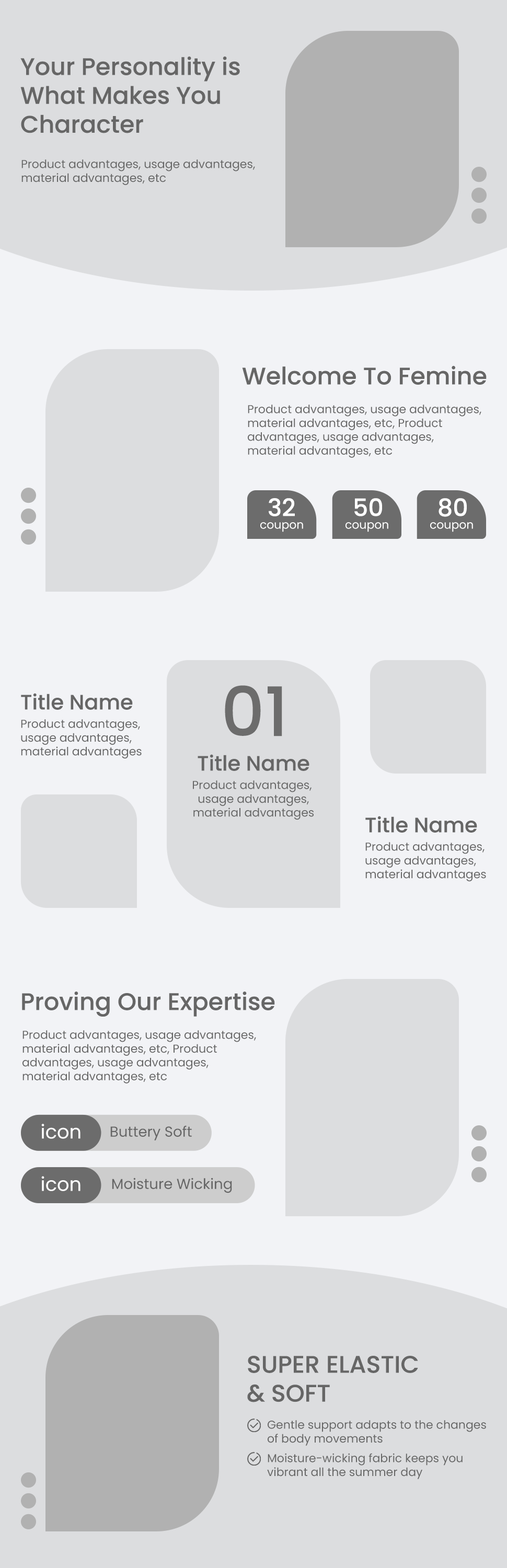
<style>
.page{position:relative;width:507px;height:1568px;background:#dcdddf}
.page>*{position:absolute;margin:0}
.t1{font:24px "Poppins-Medium";color:#666666}
.t2{font:11.5px "Poppins-Regular";color:#666666}
.t3{font:24px "Poppins-Medium";color:#ffffff}
.t4{font:11.5px "Poppins-Regular";color:#ffffff}
.t5{font:67.9px "Poppins-Medium";color:#6c6c6c}
.t6{font:20.9px "Poppins-Medium";color:#666666}
.t7{font:19.2px "Poppins-Regular";color:#ffffff}
.t8{font:14.4px "Poppins-Regular";color:#666666}
</style>
<div class="page">
<p class="t1" style="left:20px;top:56px;width:220px;height:77px">Your Personality is<br>What Makes You<br>Character</p>
<p class="t2" style="left:21px;top:159px;width:234px;height:26px">Product advantages, usage advantages, <br>material advantages, etc</p>
<p class="t1" style="left:242px;top:366px;width:245px;height:19px">Welcome To Femine</p>
<p class="t2" style="left:248px;top:405px;width:233px;height:53px">Product advantages, usage advantages,<br>material advantages, etc, Product<br>advantages, usage advantages,<br>material advantages, etc</p>
<p class="t3" style="left:269px;top:498px;width:26px;height:18px">32</p>
<p class="t3" style="left:354px;top:498px;width:28px;height:18px">50</p>
<p class="t3" style="left:439px;top:498px;width:28px;height:19px">80</p>
<p class="t4" style="left:260px;top:522px;width:43px;height:10px">coupon</p>
<p class="t4" style="left:345px;top:522px;width:43px;height:10px">coupon</p>
<p class="t4" style="left:430px;top:522px;width:43px;height:10px">coupon</p>
<p class="t5" style="left:225px;top:685px;width:57px;height:51px">01</p>
<p class="t6" style="left:21px;top:693px;width:112px;height:17px">Title Name</p>
<p class="t2" style="left:21px;top:719px;width:121px;height:40px">Product advantages, <br>usage advantages,<br>material advantages</p>
<p class="t6" style="left:198px;top:754px;width:111px;height:17px">Title Name</p>
<p class="t2" style="left:193px;top:780px;width:121px;height:40px;text-align:center">Product advantages, <br>usage advantages,<br>material advantages</p>
<p class="t6" style="left:365px;top:816px;width:112px;height:17px">Title Name</p>
<p class="t2" style="left:365px;top:842px;width:121px;height:40px">Product advantages, <br>usage advantages,<br>material advantages</p>
<p class="t1" style="left:22px;top:991px;width:253px;height:26px">Proving Our Expertise</p>
<p class="t2" style="left:22px;top:1030px;width:234px;height:53px">Product advantages, usage advantages,<br>material advantages, etc, Product<br>advantages, usage advantages,<br>material advantages, etc</p>
<p class="t7" style="left:41px;top:1124px;width:39px;height:15px">icon</p>
<p class="t8" style="left:110px;top:1125px;width:82px;height:15px">Buttery Soft</p>
<p class="t7" style="left:41px;top:1176px;width:39px;height:15px">icon</p>
<p class="t8" style="left:112px;top:1178px;width:120px;height:15px">Moisture Wicking</p>
<p class="t1" style="left:247px;top:1356px;width:171px;height:46px">SUPER ELASTIC<br>&amp; SOFT</p>
<p class="t2" style="left:268px;top:1420px;width:218px;height:26px">Gentle support adapts to the changes<br>of body movements</p>
<p class="t2" style="left:267px;top:1453px;width:196px;height:26px">Moisture-wicking fabric keeps you<br>vibrant all the summer day</p>
</div>
